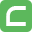
<style>
.page{position:relative;width:32px;height:32px;background:#5cb85c}
.page>*{position:absolute;margin:0}
.t1{font:28px "Individigital";color:#ffffff}
</style>
<div class="page">
<p class="t1" style="left:6px;top:6px;width:20px;height:20px">C</p>
</div>
